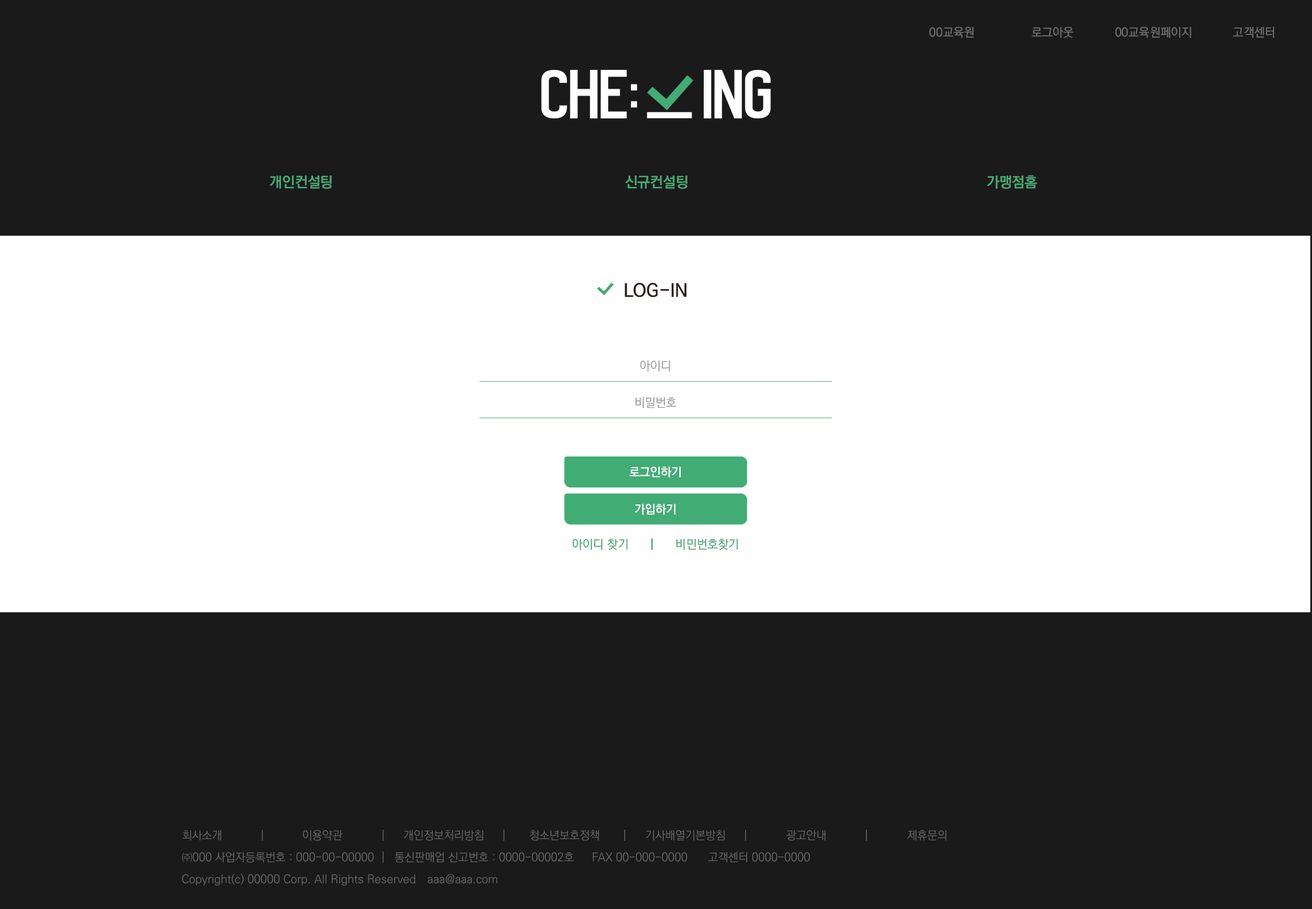
<style>
.page{position:relative;width:1312px;height:909px;background:#1a1a1a}
.page>*{position:absolute;margin:0}
.t1{font:12.1px "KoPubWorldDotumPM";color:#717071}
.t2{font:14.6px "KoPubWorldDotumPM";color:#41ac74}
.t3{font:14.6px "KoPubWorldDotumPB";color:#41ac74}
.t4{font:18.2px "KoPubWorldDotumPB";color:#291f1d}
.t5{font:12.1px "KoPubWorldDotumPL";color:#8c9091}
.t6{font:12.1px "KoPubWorldDotumPM";color:#ffffff}
.t7{font:12.1px "KoPubWorldDotumPB";color:#ffffff}
.t8{font:12.1px "KoPubWorldDotumPL";color:#41ac74}
.t9{font:12.1px "KoPubWorldDotumPB";color:#41ac74}
</style>
<div class="page">
<p class="t1" style="left:929px;top:27px;width:45px;height:11px">00교육원</p>
<p class="t1" style="left:1031px;top:27px;width:42px;height:11px">로그아웃</p>
<p class="t1" style="left:1115px;top:27px;width:76px;height:11px">00교육원페이지</p>
<p class="t1" style="left:1233px;top:27px;width:41px;height:11px">고객센터</p>
<p class="t2" style="left:269px;top:175px;width:63px;height:14px">개인컨설팅</p>
<p class="t3" style="left:269px;top:175px;width:63px;height:14px">개인컨설팅</p>
<p class="t2" style="left:625px;top:175px;width:62px;height:14px">신규컨설팅</p>
<p class="t3" style="left:625px;top:175px;width:62px;height:14px">신규컨설팅</p>
<p class="t3" style="left:987px;top:175px;width:50px;height:14px">가맹점홈</p>
<p class="t2" style="left:987px;top:175px;width:50px;height:14px">가맹점홈</p>
<p class="t4" style="left:624px;top:283px;width:63px;height:14px">LOG-IN</p>
<p class="t5" style="left:640px;top:360px;width:30px;height:11px">아이디</p>
<p class="t5" style="left:636px;top:397px;width:40px;height:11px">비밀번호</p>
<p class="t6" style="left:629px;top:466px;width:52px;height:12px">로그인하기</p>
<p class="t7" style="left:629px;top:466px;width:52px;height:12px">로그인하기</p>
<p class="t6" style="left:634px;top:504px;width:42px;height:11px">가입하기</p>
<p class="t7" style="left:634px;top:504px;width:42px;height:11px">가입하기</p>
<p class="t8" style="left:573px;top:538px;width:165px;height:12px">아이디 찾기      <span class="t9">|</span>      비민번호찾기</p>
<p class="t8" style="left:573px;top:538px;width:165px;height:12px">아이디 찾기      <span class="t9">|</span>      비민번호찾기</p>
</div>
